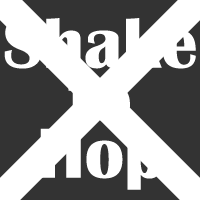
<style>
.page{position:relative;width:200px;height:200px;background:#ffffff}
.page>*{position:absolute;margin:0}
.t1{font:73px/55px "BritannicBold";color:#ffffff}
</style>
<div class="page">
<p class="t1" style="left:4px;top:18px;width:192px;height:172px;text-align:center">Shake<br>to<br>Hop</p>
</div>
